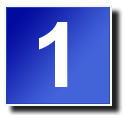
<style>
.page{position:relative;width:126px;height:115px}
.page>*{position:absolute;margin:0}
.t1{font:90px "Arial-BoldMT";color:#ffffff}
</style>
<div class="page">
<p class="t1" style="left:39px;top:22px;width:29px;height:65px">1</p>
</div>
